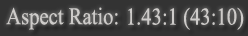
<style>
.page{position:relative;width:248px;height:36px;background:#333333}
.page>*{position:absolute;margin:0}
.t1{font:24px "TimesNewRomanPSMT";color:#cdcbc9;scale:0.86 1}
</style>
<div class="page">
<p class="t1" style="left:6px;top:7px;width:112px;height:23px">Aspect Ratio:</p>
<p class="t1" style="left:128px;top:7px;width:116px;height:23px">1.43:1 (43:10)</p>
</div>
